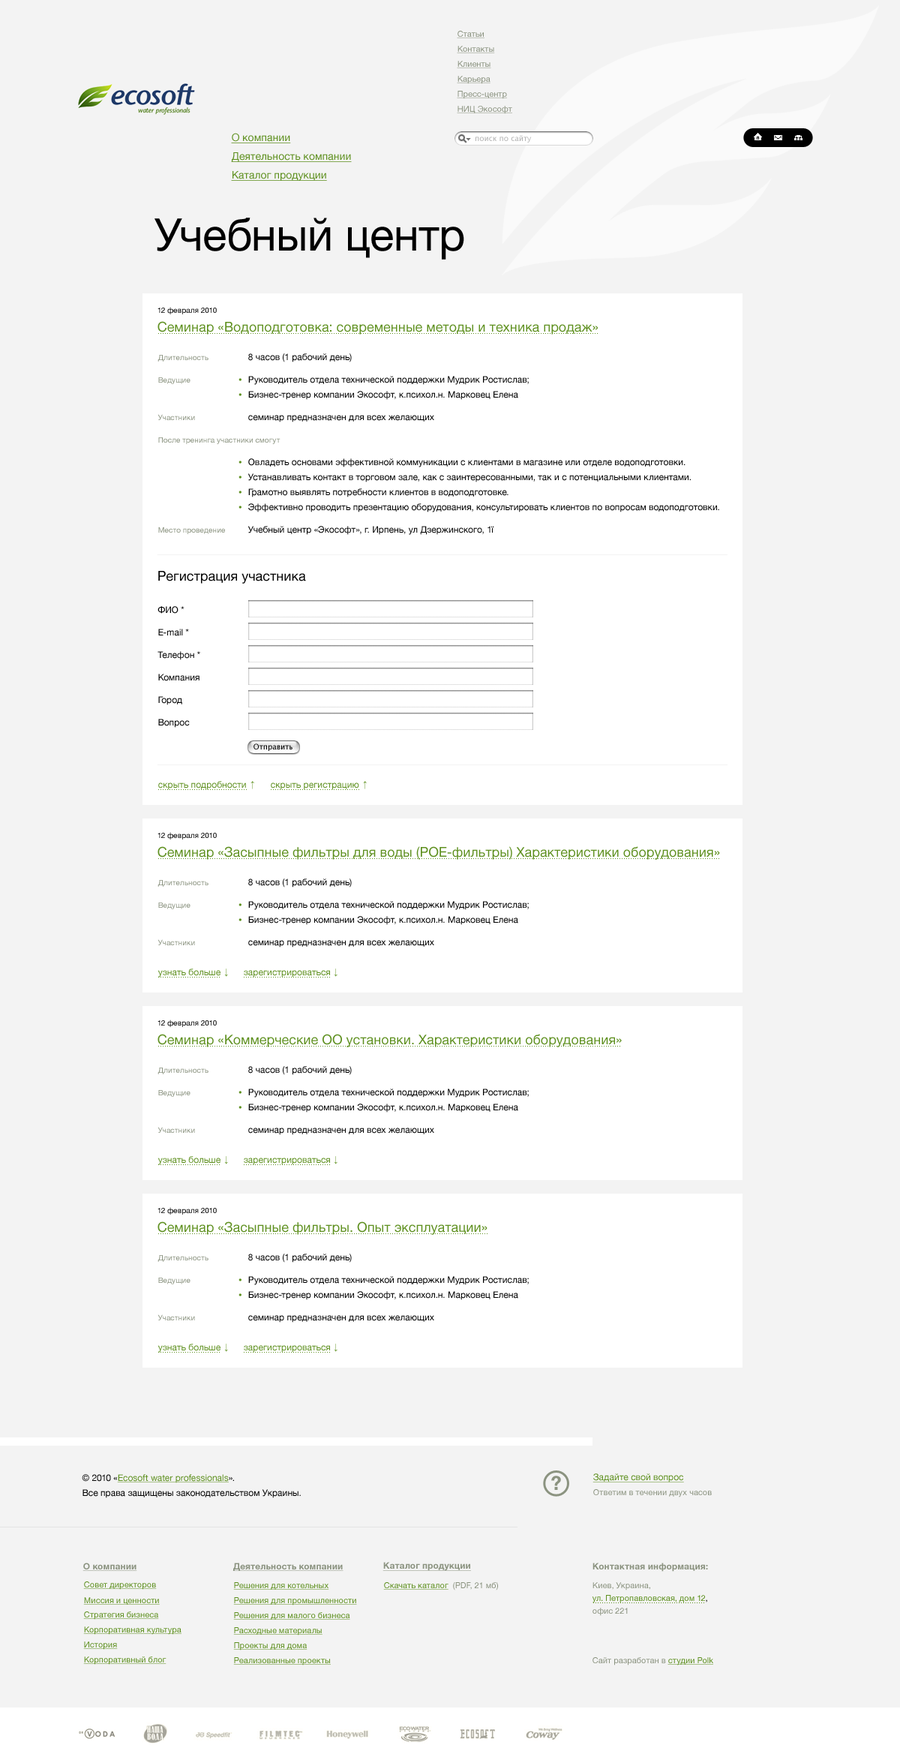
<style>
.page{position:relative;width:900px;height:1763px;background:#f3f3f3}
.page>*{position:absolute;margin:0}
.t1{font:8.3px "HelveticaNeue";color:#8b9380;text-decoration:underline}
.t2{font:10.5px "HelveticaNeue";color:#5e901f;text-decoration:underline}
.t3{font:7.5px "LucidaGrande";color:#b2b2b2}
.t4{font:45px "HelveticaNeue";color:#000000}
.t5{font:7.5px "HelveticaNeue";color:#000000}
.t6{font:13.5px "HelveticaNeue";color:#5e901f}
.t7{font:9px "HelveticaNeue";color:#000000}
.t8{font:7.5px "HelveticaNeue";color:#8b9380}
.t9{font:9px/15px "HelveticaNeue";color:#000000}
.t10{font:13.5px "HelveticaNeue";color:#000000}
.t11{font:7.5px "LucidaGrande";color:#000000}
.t12{font:9px "HelveticaNeue";color:#5e901f}
.t13{font:9px "ArialMT";color:#5e901f}
.t14{font:9px/15px "HelveticaNeue";color:#5e901f;text-decoration:underline}
.t15{font:9px "HelveticaNeue";color:#5e901f;text-decoration:underline}
.t16{font:8.2px "HelveticaNeue";color:#8b9380}
.t17{font:9px "HelveticaNeue-Bold";color:#8b9380;text-decoration:underline}
.t18{font:8.3px/12.8px "HelveticaNeue";color:#5e901f}
.t19{font:9px/15px "HelveticaNeue-Bold";color:#8b9380}
.t20{font:8.3px/18.8px "HelveticaNeue";color:#8b9380}
.t21{font:8.3px/12.8px "HelveticaNeue";color:#000000}
.t22{font:8.3px/12.8px "HelveticaNeue";color:#8b9380}
.t23{font:8.3px "HelveticaNeue";color:#5e901f;text-decoration:underline}
.t24{font:8.3px "HelveticaNeue";color:#8b9380}
.t25{font:8.2px "HelveticaNeue";color:#5e901f;text-decoration:underline}
</style>
<div class="page">
<p class="t1" style="left:457px;top:31px;width:28px;height:7px">Статьи</p>
<p class="t1" style="left:457px;top:46px;width:38px;height:7px">Контакты</p>
<p class="t1" style="left:457px;top:61px;width:34px;height:7px">Клиенты</p>
<p class="t1" style="left:457px;top:76px;width:34px;height:8px">Карьера</p>
<p class="t1" style="left:457px;top:91px;width:50px;height:8px">Пресс-центр</p>
<p class="t1" style="left:457px;top:106px;width:55px;height:8px">НИЦ Экософт</p>
<p class="t2" style="left:231px;top:133px;width:60px;height:10px">О компании</p>
<p class="t3" style="left:476px;top:135px;width:56px;height:8px">поиск по сайту</p>
<p class="t2" style="left:231px;top:152px;width:121px;height:10px">Деятельность компании</p>
<p class="t2" style="left:231px;top:171px;width:96px;height:10px">Каталог продукции</p>
<p class="t4" style="left:155px;top:218px;width:309px;height:42px">Учебный центр</p>
<p class="t5" style="left:158px;top:307px;width:59px;height:7px">12 февраля 2010</p>
<p class="t6" style="left:158px;top:321px;width:440px;height:14px">Семинар «Водоподготовка: современные методы и техника продаж»</p>
<p class="t7" style="left:248px;top:353px;width:104px;height:9px">8 часов (1 рабочий день)</p>
<p class="t8" style="left:158px;top:355px;width:51px;height:7px">Длительность</p>
<p class="t8" style="left:158px;top:377px;width:33px;height:7px">Ведущие</p>
<p class="t9" style="left:248px;top:376px;width:281px;height:24px">Руководитель отдела технической поддержки Мудрик Ростислав;<br>Бизнес-тренер компании Экософт, к.психол.н. Марковец Елена</p>
<p class="t8" style="left:158px;top:414px;width:37px;height:6px">Участники</p>
<p class="t7" style="left:248px;top:415px;width:186px;height:7px">семинар предназначен для всех желающих</p>
<p class="t8" style="left:158px;top:437px;width:123px;height:7px">После тренинга участники смогут</p>
<p class="t9" style="left:248px;top:458px;width:471px;height:54px">Овладеть основами эффективной коммуникации с клиентами в магазине или отделе водоподготовки.<br>Устанавливать контакт в торговом зале, как с заинтересованными, так и с потенциальными клиентами.<br>Грамотно выявлять потребности клиентов в водоподготовке.<br>Эффективно проводить презентацию оборудования, консультировать клиентов по вопросам водоподготовки.</p>
<p class="t8" style="left:158px;top:527px;width:67px;height:7px">Место проведение</p>
<p class="t7" style="left:248px;top:526px;width:246px;height:9px">Учебный центр «Экософт», г. Ирпень, ул Дзержинского, 1ї</p>
<p class="t10" style="left:158px;top:571px;width:148px;height:13px">Регистрация участника</p>
<p class="t7" style="left:158px;top:606px;width:27px;height:8px">ФИО *</p>
<p class="t7" style="left:158px;top:629px;width:31px;height:7px">E-mail *</p>
<p class="t7" style="left:158px;top:651px;width:42px;height:9px">Телефон *</p>
<p class="t7" style="left:158px;top:674px;width:42px;height:7px">Компания</p>
<p class="t7" style="left:158px;top:696px;width:24px;height:9px">Город</p>
<p class="t7" style="left:158px;top:719px;width:32px;height:9px">Вопрос</p>
<p class="t11" style="left:254px;top:743px;width:39px;height:8px">Отправить</p>
<p class="t12" style="left:158px;top:781px;width:88px;height:9px">скрыть подробности</p>
<p class="t13" style="left:251px;top:781px;width:3px;height:8px">↑</p>
<p class="t12" style="left:271px;top:782px;width:88px;height:8px">скрыть регистрацию</p>
<p class="t13" style="left:363px;top:781px;width:4px;height:8px">↑</p>
<p class="t5" style="left:158px;top:832px;width:59px;height:7px">12 февраля 2010</p>
<p class="t6" style="left:158px;top:846px;width:562px;height:14px">Семинар «Засыпные фильтры для воды (POE-фильтры) Характеристики оборудования»</p>
<p class="t8" style="left:158px;top:880px;width:51px;height:7px">Длительность</p>
<p class="t7" style="left:248px;top:878px;width:104px;height:9px">8 часов (1 рабочий день)</p>
<p class="t8" style="left:158px;top:902px;width:33px;height:7px">Ведущие</p>
<p class="t9" style="left:248px;top:901px;width:281px;height:24px">Руководитель отдела технической поддержки Мудрик Ростислав;<br>Бизнес-тренер компании Экософт, к.психол.н. Марковец Елена</p>
<p class="t8" style="left:158px;top:939px;width:37px;height:6px">Участники</p>
<p class="t7" style="left:248px;top:940px;width:186px;height:7px">семинар предназначен для всех желающих</p>
<p class="t12" style="left:158px;top:968px;width:63px;height:9px">узнать больше</p>
<p class="t13" style="left:224px;top:968px;width:4px;height:9px">↓</p>
<p class="t12" style="left:244px;top:970px;width:86px;height:7px">зарегистрироваться</p>
<p class="t13" style="left:334px;top:968px;width:4px;height:9px">↓</p>
<p class="t5" style="left:158px;top:1019px;width:59px;height:8px">12 февраля 2010</p>
<p class="t6" style="left:158px;top:1034px;width:464px;height:13px">Семинар «Коммерческие ОО установки. Характеристики оборудования»</p>
<p class="t8" style="left:158px;top:1067px;width:51px;height:7px">Длительность</p>
<p class="t7" style="left:248px;top:1066px;width:104px;height:9px">8 часов (1 рабочий день)</p>
<p class="t8" style="left:158px;top:1090px;width:33px;height:7px">Ведущие</p>
<p class="t9" style="left:248px;top:1088px;width:281px;height:24px">Руководитель отдела технической поддержки Мудрик Ростислав;<br>Бизнес-тренер компании Экософт, к.психол.н. Марковец Елена</p>
<p class="t8" style="left:158px;top:1127px;width:37px;height:6px">Участники</p>
<p class="t7" style="left:248px;top:1127px;width:186px;height:8px">семинар предназначен для всех желающих</p>
<p class="t12" style="left:158px;top:1156px;width:63px;height:9px">узнать больше</p>
<p class="t13" style="left:224px;top:1156px;width:4px;height:8px">↓</p>
<p class="t12" style="left:244px;top:1157px;width:86px;height:8px">зарегистрироваться</p>
<p class="t13" style="left:334px;top:1156px;width:4px;height:8px">↓</p>
<p class="t5" style="left:158px;top:1207px;width:59px;height:7px">12 февраля 2010</p>
<p class="t6" style="left:158px;top:1221px;width:330px;height:14px">Семинар «Засыпные фильтры. Опыт эксплуатации»</p>
<p class="t7" style="left:248px;top:1253px;width:104px;height:9px">8 часов (1 рабочий день)</p>
<p class="t8" style="left:158px;top:1255px;width:51px;height:7px">Длительность</p>
<p class="t8" style="left:158px;top:1277px;width:33px;height:7px">Ведущие</p>
<p class="t9" style="left:248px;top:1276px;width:281px;height:24px">Руководитель отдела технической поддержки Мудрик Ростислав;<br>Бизнес-тренер компании Экософт, к.психол.н. Марковец Елена</p>
<p class="t8" style="left:158px;top:1314px;width:37px;height:6px">Участники</p>
<p class="t7" style="left:248px;top:1315px;width:186px;height:7px">семинар предназначен для всех желающих</p>
<p class="t12" style="left:158px;top:1343px;width:63px;height:9px">узнать больше</p>
<p class="t13" style="left:224px;top:1343px;width:4px;height:9px">↓</p>
<p class="t12" style="left:244px;top:1345px;width:86px;height:7px">зарегистрироваться</p>
<p class="t13" style="left:334px;top:1343px;width:4px;height:9px">↓</p>
<p class="t9" style="left:82px;top:1474px;width:219px;height:24px">© 2010 «<span class="t14">Ecosoft water professionals</span>».<br>Все права защищены законодательством Украины.</p>
<p class="t15" style="left:593px;top:1473px;width:91px;height:9px">Задайте свой вопрос</p>
<p class="t16" style="left:593px;top:1489px;width:119px;height:8px">Ответим в течении двух часов</p>
<p class="t17" style="left:83px;top:1562px;width:54px;height:9px">О компании</p>
<p class="t17" style="left:233px;top:1562px;width:111px;height:9px">Деятельность компании</p>
<p class="t17" style="left:383px;top:1562px;width:88px;height:9px">Каталог продукции</p>
<p class="t18" style="left:592px;top:1562px;width:116px;height:54px"><span class="t19">Контактная информация:<br></span><span class="t20">Киев, Украина,<br></span>ул. Петропавловская, дом 12<span class="t21">,<br></span><span class="t22">офис 221</span></p>
<p class="t23" style="left:83px;top:1581px;width:74px;height:8px">Совет директоров</p>
<p class="t23" style="left:233px;top:1582px;width:96px;height:7px">Решения для котельных</p>
<p class="t23" style="left:383px;top:1582px;width:66px;height:7px">Скачать каталог</p>
<p class="t24" style="left:453px;top:1582px;width:45px;height:8px">(PDF, 21 мб)</p>
<p class="t23" style="left:83px;top:1597px;width:77px;height:7px">Миссия и ценности</p>
<p class="t23" style="left:233px;top:1597px;width:124px;height:8px">Решения для промышленности</p>
<p class="t23" style="left:83px;top:1611px;width:76px;height:8px">Стратегия бизнеса</p>
<p class="t23" style="left:233px;top:1612px;width:117px;height:7px">Решения для малого бизнеса</p>
<p class="t23" style="left:83px;top:1626px;width:99px;height:8px">Корпоративная культура</p>
<p class="t23" style="left:233px;top:1627px;width:90px;height:8px">Расходные материалы</p>
<p class="t23" style="left:83px;top:1641px;width:35px;height:8px">История</p>
<p class="t23" style="left:233px;top:1642px;width:75px;height:8px">Проекты для дома</p>
<p class="t23" style="left:83px;top:1656px;width:84px;height:8px">Корпоративный блог</p>
<p class="t23" style="left:233px;top:1657px;width:98px;height:8px">Реализованные проекты</p>
<p class="t16" style="left:593px;top:1657px;width:120px;height:8px">Сайт разработан в <span class="t25">студии Polk</span></p>
</div>
